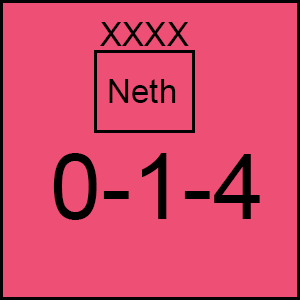
<style>
.page{position:relative;width:300px;height:300px;background:#ee4f74}
.page>*{position:absolute;margin:0}
.t1{font:33.3px "ArialMT";color:#000000}
.t2{font:91.7px "ArialMT";color:#000000}
</style>
<div class="page">
<p class="t1" style="left:100px;top:22px;width:89px;height:24px">XXXX</p>
<p class="t1" style="left:109px;top:79px;width:67px;height:24px">Neth</p>
<p class="t2" style="left:53px;top:153px;width:207px;height:67px">0-1-4</p>
</div>
